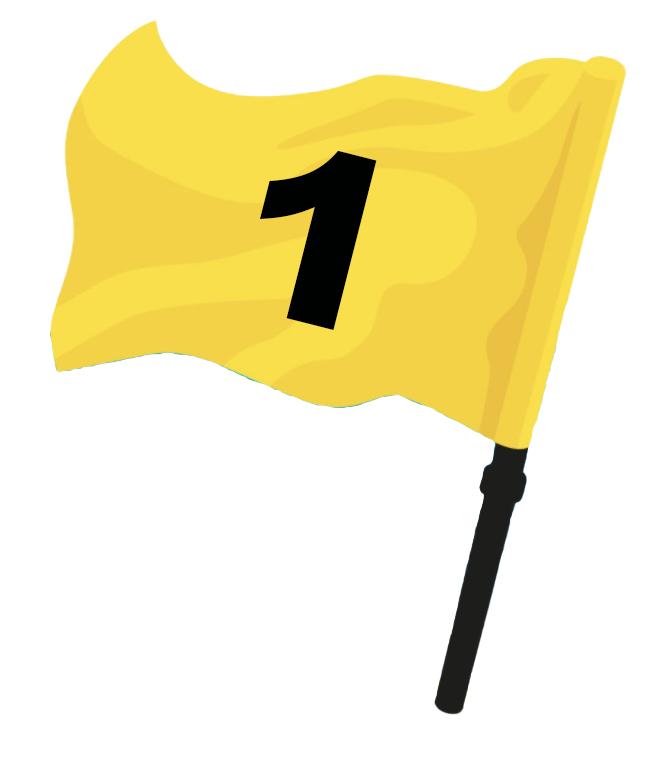
<style>
.page{position:relative;width:666px;height:758px;background:#ffffff}
.page>*{position:absolute;margin:0}
.t1{font:240px "Arial-Black";color:#000101}
</style>
<div class="page">
<p class="t1" style="left:259px;top:150px;width:118px;height:180px;rotate:14deg">1</p>
</div>
